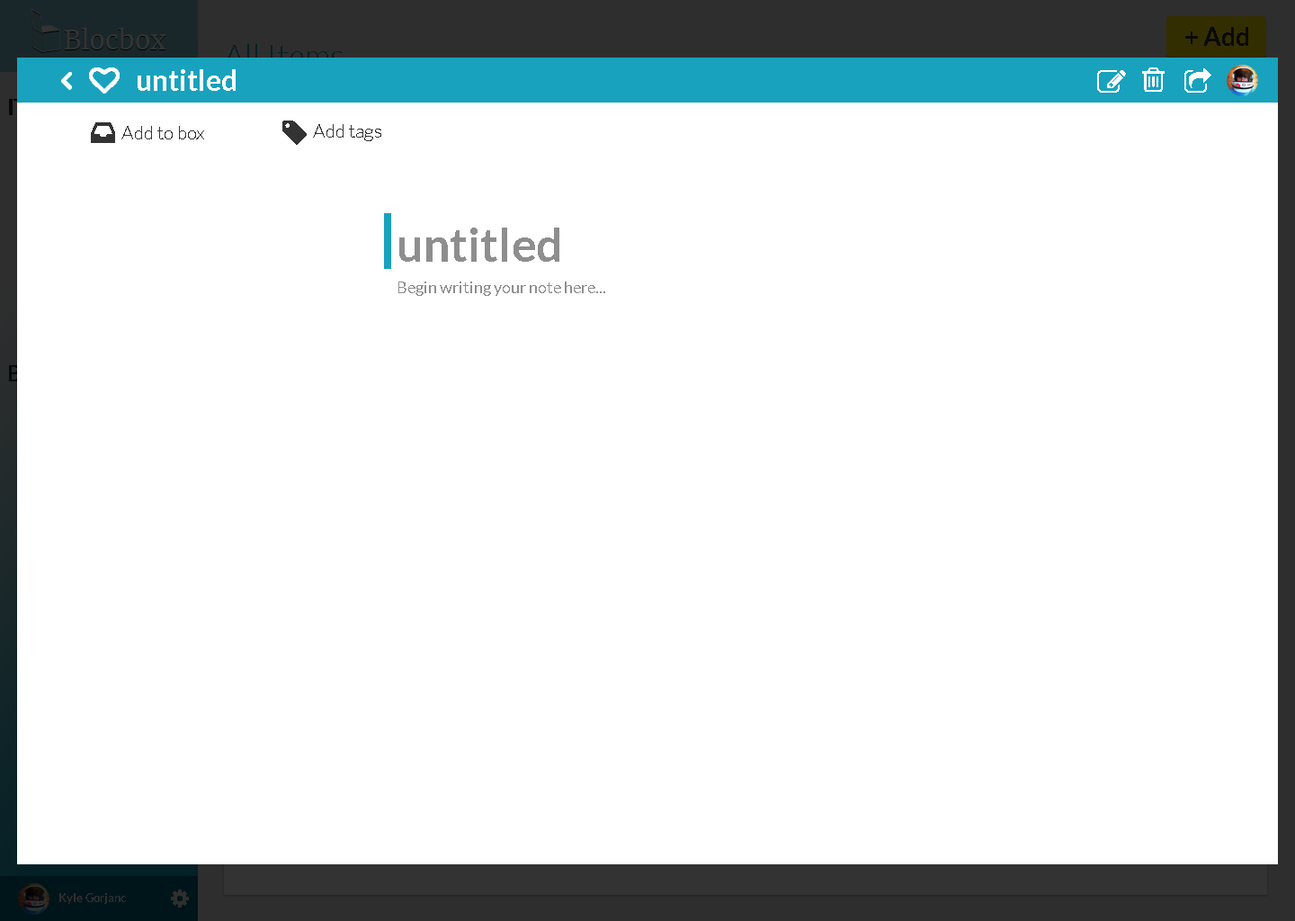
<style>
.page{position:relative;width:1295px;height:921px;background:#ffffff}
.page>*{position:absolute;margin:0}
.t1{font:25.6px "Lato-Bold";color:#0a0a0a}
.t2{font:32.4px "Lato-Light"}
.t3{font:28.8px "Lato-Bold";color:#ffffff}
.t4{font:19.2px "Lato-Light";color:#333333}
.t5{font:46.8px "Lato-Bold";color:#8e8e8e}
.t6{font:16.2px "Lato-Regular";color:#8e8e8e}
.t7{font:11.7px "Lato-Bold";color:#2e2e2e}
</style>
<div class="page">
<p class="t1" style="left:1185px;top:27px;width:63px;height:19px">+ Add</p>
<p class="t2" style="left:224px;top:44px;width:119px;height:23px">All Items</p>
<p class="t3" style="left:138px;top:69px;width:98px;height:22px">untitled</p>
<p class="t4" style="left:121px;top:126px;width:83px;height:13px">Add to box</p>
<p class="t4" style="left:313px;top:124px;width:68px;height:17px">Add tags</p>
<p class="t5" style="left:399px;top:228px;width:160px;height:34px">untitled</p>
<p class="t6" style="left:398px;top:281px;width:207px;height:15px">Begin writing your note here...</p>
<p class="t7" style="left:59px;top:893px;width:67px;height:11px">Kyle Gorjanc</p>
</div>
